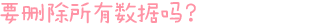
<style>
.page{position:relative;width:322px;height:24px;background:#ffffff}
.page>*{position:absolute;margin:0}
.t1{font:26px "¢è?";color:#ff93a5}
</style>
<div class="page">
<p class="t1" style="left:0px;top:2px;width:196px;height:22px">要删除所有数据吗？</p>
</div>
